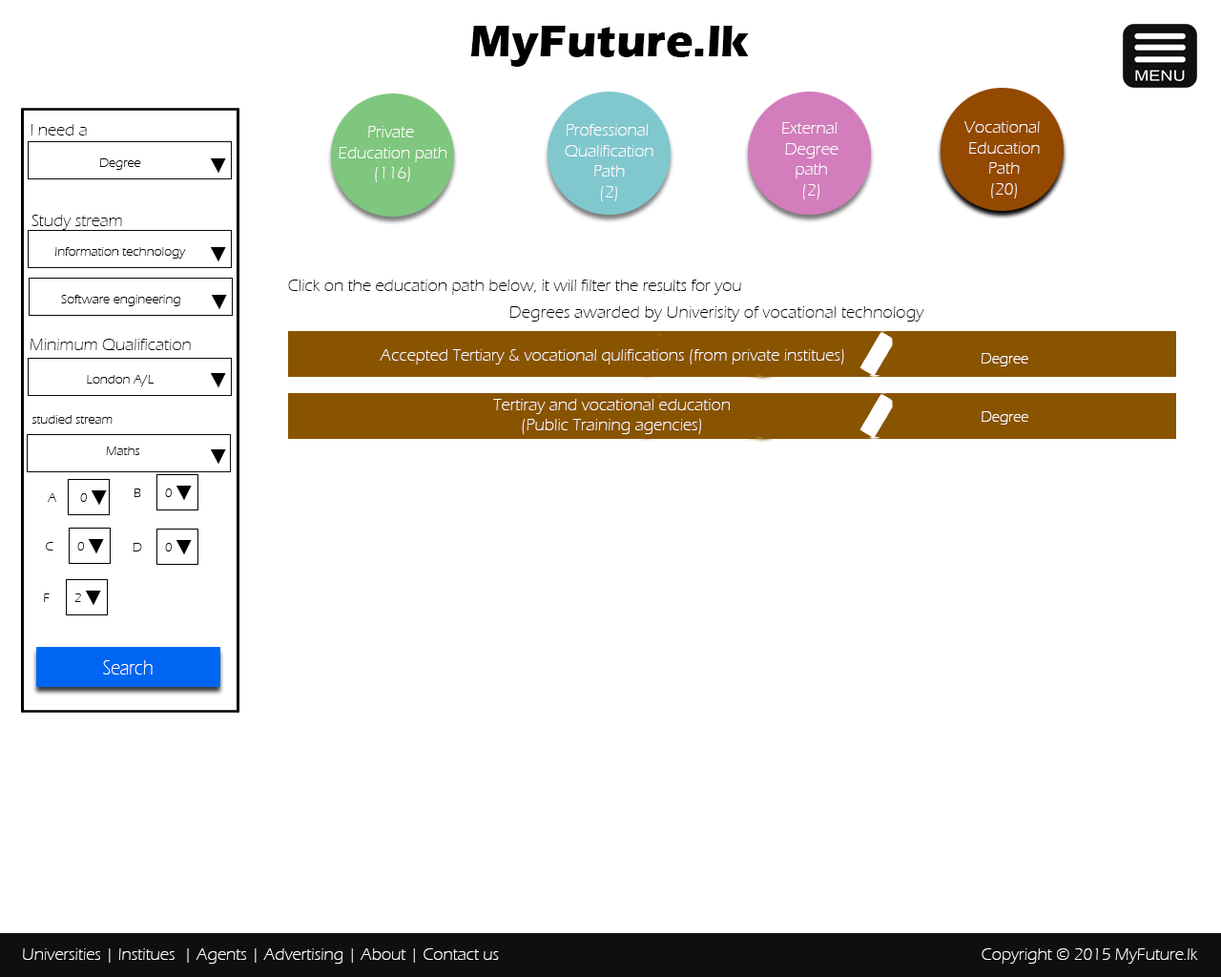
<style>
.page{position:relative;width:1221px;height:977px;background:#ffffff}
.page>*{position:absolute;margin:0}
.t1{font:45.8px "ErasITC-Bold";color:#000000}
.t2{font:17.2px "ErasITC-Light";color:#090909}
.t3{font:17.2px "ErasITC-Light";color:#fffefe}
.t4{font:13.4px "ErasITC-Light";color:#090909}
.t5{font:17.2px "ErasITC-Light";color:#000000}
.t6{font:15px "ErasITC-Light";color:#fffefe}
.t7{font:21.6px "ErasITC-Light";color:#ffffff;scale:0.83 1}
.t8{font:17.2px "ErasITC-Light";color:#ffffff}
</style>
<div class="page">
<p class="t1" style="left:470px;top:26px;width:279px;height:41px">MyFuture.lk</p>
<p class="t2" style="left:31px;top:124px;width:56px;height:11px">I need a</p>
<p class="t3" style="left:339px;top:126px;width:108px;height:56px;text-align:center">Private <br>Education path<br>(116)</p>
<p class="t3" style="left:565px;top:124px;width:88px;height:77px;text-align:center">Professional <br>Qualification<br>Path<br>(2)</p>
<p class="t3" style="left:782px;top:122px;width:56px;height:77px;text-align:center">External <br>Degree<br>path<br>(2)</p>
<p class="t3" style="left:964px;top:121px;width:76px;height:77px;text-align:center">Vocational <br>Education<br>Path<br>(20)</p>
<p class="t4" style="left:99px;top:158px;width:42px;height:12px">Degree</p>
<p class="t2" style="left:31px;top:215px;width:91px;height:15px">Study stream</p>
<p class="t4" style="left:55px;top:247px;width:131px;height:11px">Information technology</p>
<p class="t5" style="left:288px;top:279px;width:453px;height:16px">Click on the education path below, it will filter the results for you</p>
<p class="t4" style="left:61px;top:295px;width:119px;height:11px">Software engineering</p>
<p class="t5" style="left:509px;top:306px;width:415px;height:15px">Degrees awarded by Univerisity of vocational technology</p>
<p class="t2" style="left:30px;top:339px;width:161px;height:11px">Minimum Qualification</p>
<p class="t3" style="left:380px;top:349px;width:464px;height:15px">Accepted Tertiary &amp; vocational qulifications (from private institues)</p>
<p class="t6" style="left:981px;top:353px;width:47px;height:13px">Degree</p>
<p class="t4" style="left:87px;top:375px;width:67px;height:11px">London A/L</p>
<p class="t3" style="left:493px;top:399px;width:237px;height:35px;text-align:center">Tertiray and vocational education<br>(Public Training agencies)</p>
<p class="t6" style="left:981px;top:411px;width:47px;height:13px">Degree</p>
<p class="t4" style="left:31px;top:415px;width:82px;height:8px">studied stream</p>
<p class="t4" style="left:106px;top:446px;width:33px;height:9px">Maths</p>
<p class="t4" style="left:48px;top:493px;width:8px;height:9px">A</p>
<p class="t4" style="left:80px;top:493px;width:7px;height:9px">0</p>
<p class="t4" style="left:134px;top:488px;width:7px;height:9px">B</p>
<p class="t4" style="left:165px;top:488px;width:7px;height:9px">0</p>
<p class="t4" style="left:46px;top:542px;width:7px;height:8px">C</p>
<p class="t4" style="left:77px;top:542px;width:7px;height:8px">0</p>
<p class="t4" style="left:133px;top:543px;width:9px;height:8px">D</p>
<p class="t4" style="left:165px;top:543px;width:7px;height:8px">0</p>
<p class="t4" style="left:44px;top:593px;width:6px;height:9px">F</p>
<p class="t4" style="left:74px;top:593px;width:7px;height:9px">2</p>
<p class="t7" style="left:103px;top:660px;width:50px;height:14px">Search</p>
<p class="t8" style="left:23px;top:948px;width:476px;height:15px">Universities | Institues  | Agents | Advertising | About | Contact us</p>
<p class="t8" style="left:981px;top:948px;width:217px;height:15px">Copyright © 2015 MyFuture.lk</p>
</div>
